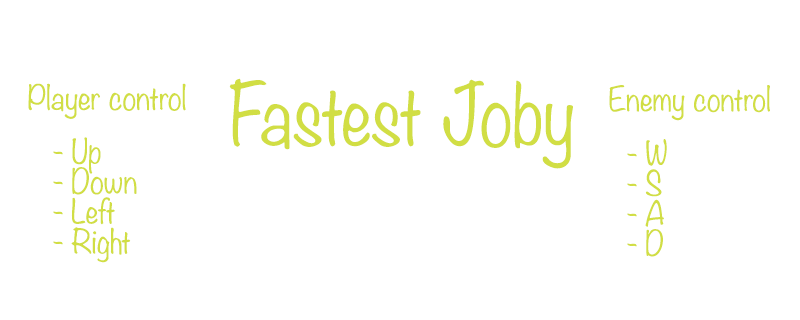
<style>
.page{position:relative;width:800px;height:320px;background:#ffffff}
.page>*{position:absolute;margin:0}
.t1{font:76.8px "Noteworthy-Light";color:#d1de44;scale:0.94 1}
.t2{font:30px "Noteworthy-Light";color:#d1de44}
.t3{font:30px/30px "Noteworthy-Light";color:#d1de44}
</style>
<div class="page">
<p class="t1" style="left:229px;top:78px;width:344px;height:91px">Fastest Joby</p>
<p class="t2" style="left:28px;top:83px;width:158px;height:36px">Player control</p>
<p class="t2" style="left:609px;top:85px;width:161px;height:36px">Enemy control</p>
<p class="t3" style="left:53px;top:137px;width:84px;height:126px">- Up<br>- Down<br>- Left<br>- Right</p>
<p class="t3" style="left:627px;top:139px;width:40px;height:118px">- W<br>- S<br>- A<br>- D</p>
</div>
